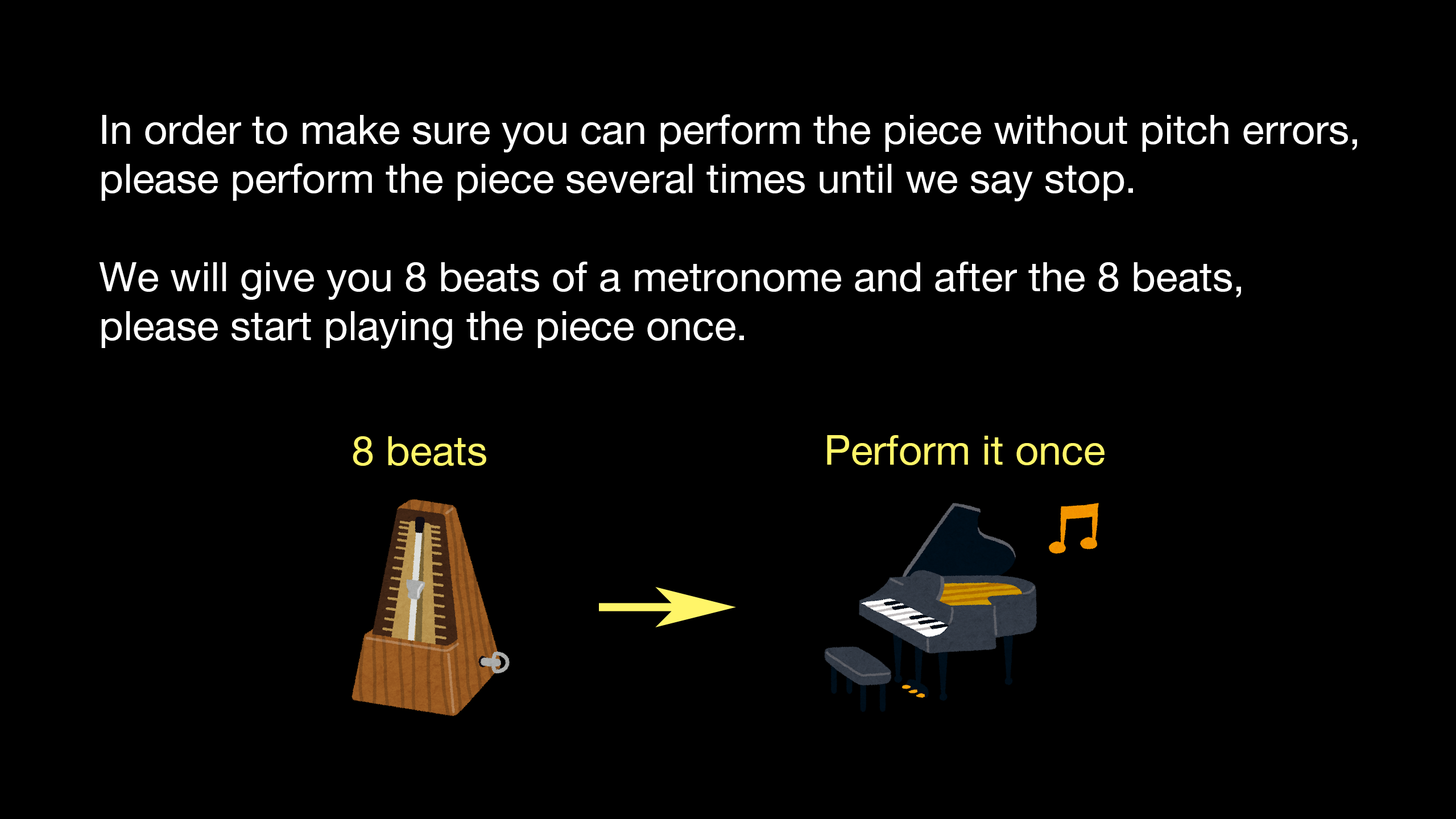
<style>
.page{position:relative;width:1456px;height:819px;background:#000000}
.page>*{position:absolute;margin:0}
.t1{font:40.9px "HelveticaNeue";color:#ffffff}
.t2{font:40.9px "HelveticaNeue";color:#fff568}
</style>
<div class="page">
<p class="t1" style="left:99px;top:114px;width:1258px;height:235px">In order to make sure you can perform the piece without pitch errors,<br>please perform the piece several times until we say stop.<br><br>We will give you 8 beats of a metronome and after the 8 beats,<br>please start playing the piece once.</p>
<p class="t2" style="left:353px;top:436px;width:133px;height:30px">8 beats</p>
<p class="t2" style="left:827px;top:435px;width:277px;height:30px">Perform it once</p>
</div>
